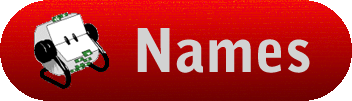
<style>
.page{position:relative;width:352px;height:101px}
.page>*{position:absolute;margin:0}
.t1{font:60px "BellGothicStd-Black";color:#d2d2d2}
</style>
<div class="page">
<p class="t1" style="left:137px;top:28px;width:173px;height:45px">Names</p>
</div>
